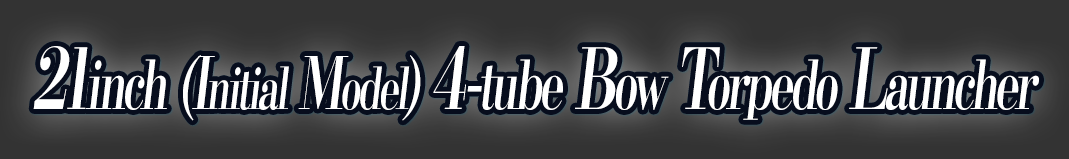
<style>
.page{position:relative;width:1069px;height:159px;background:#333333}
.page>*{position:absolute;margin:0}
.t1{font:67.2px "KochoStd-Heavy";letter-spacing:-0.08em;color:#ffffff;font-style:italic;scale:0.67 1}
.t2{font:84px "KochoStd-Heavy";letter-spacing:-0.08em;color:#ffffff;font-style:italic;scale:0.67 1}
.t3{font:72px "KochoStd-Heavy";letter-spacing:-0.08em;color:#ffffff;font-style:italic;scale:0.67 1}
.t4{font:57.6px "KochoStd-Heavy";letter-spacing:-0.08em;color:#ffffff;font-style:italic;scale:0.67 1}
</style>
<div class="page">
<p class="t1" style="left:33px;top:46px;width:1006px;height:75px"><span class="t2">21</span>inch <span class="t3">(I</span><span class="t4">nitial</span><span class="t3"> M</span><span class="t4">odel</span><span class="t3">) </span><span class="t2">4-</span>tube<span class="t2"> B</span>ow<span class="t2"> T</span>orpedo<span class="t2"> L</span>auncher</p>
</div>
